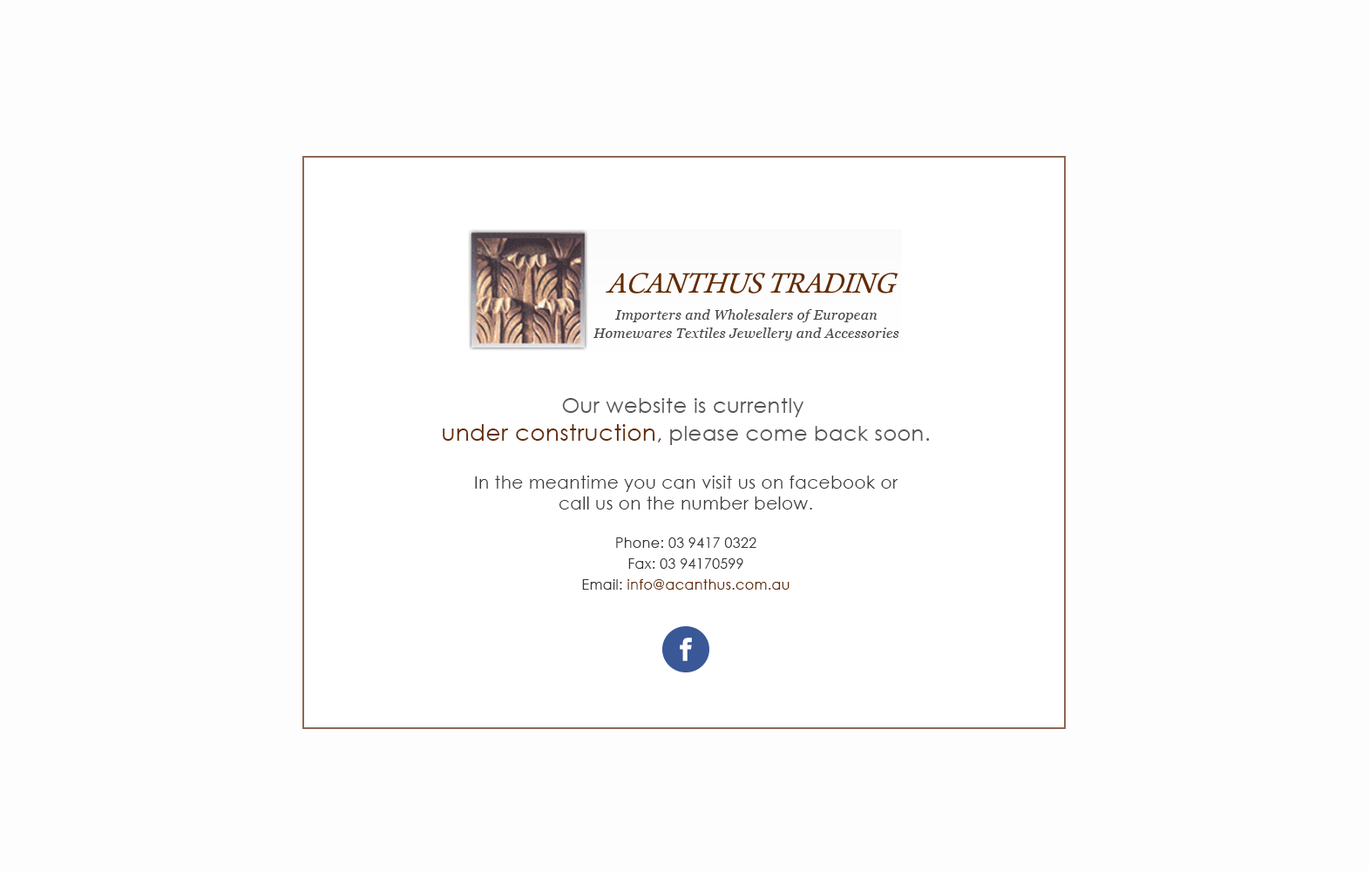
<style>
.page{position:relative;width:1369px;height:871px;background:#fdfdfd}
.page>*{position:absolute;margin:0}
.t1{font:20.9px/27.9px "CenturyGothic";letter-spacing:0.02em;color:#575757}
.t2{font:22.7px/27.9px "CenturyGothic";letter-spacing:0.02em;color:#642c04}
.t3{font:20.9px/27.9px "CenturyGothic";letter-spacing:0.02em;color:#642c04}
.t4{font:17.4px/20.9px "CenturyGothic";letter-spacing:0.02em;color:#373737}
.t5{font:13.9px/38.3px "CenturyGothic";letter-spacing:0.02em;color:#343434}
.t6{font:13.9px/20.9px "CenturyGothic";letter-spacing:0.02em;color:#343434}
.t7{font:13.9px/20.9px "CenturyGothic";letter-spacing:0.02em;color:#642c04}
</style>
<div class="page">
<p class="t1" style="left:443px;top:398px;width:487px;height:47px;text-align:center">Our website is currently <br><span class="t2">under construction</span><span class="t3">,</span> please come back soon.</p>
<p class="t4" style="left:475px;top:476px;width:423px;height:114px;text-align:center">In the meantime you can visit us on facebook or<br>call us on the number below.<br><span class="t5">Phone: 03 9417 0322<br></span><span class="t6">Fax: 03 94170599<br>Email:</span><span class="t7"> info@acanthus.com.au</span></p>
</div>
